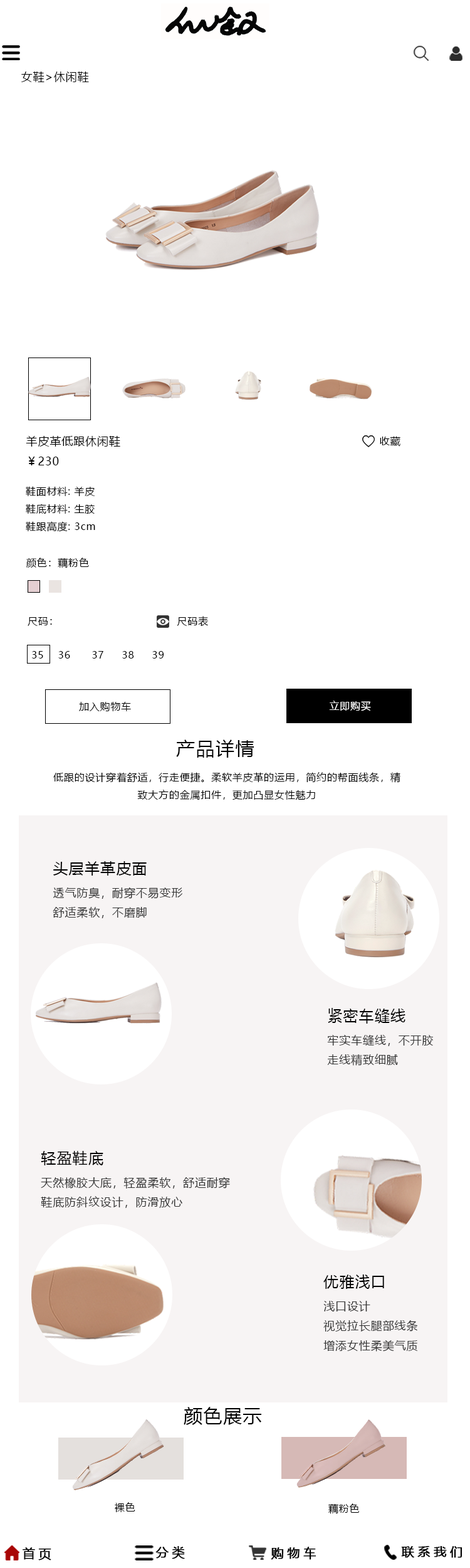
<style>
.page{position:relative;width:470px;height:1568px;background:#ffffff}
.page>*{position:absolute;margin:0}
.t1{font:11.3px "MicrosoftYaHei";letter-spacing:0.05em;color:#000000}
.t2{font:10px "MicrosoftYaHei";letter-spacing:0.05em;color:#000000}
.t3{font:10px "MicrosoftYaHei";letter-spacing:0.05em;color:#ffffff}
.t4{font:18.8px "MicrosoftYaHei";letter-spacing:0.05em;color:#000000}
.t5{font:11.3px "MicrosoftYaHei";letter-spacing:0.05em;color:#333333}
.t6{font:15.1px "MicrosoftYaHei";letter-spacing:0.05em;color:#000000}
.t7{font:12.5px "MicrosoftYaHei";letter-spacing:0.26em;color:#000000;font-weight:bold}
</style>
<div class="page">
<p class="t1" style="left:21px;top:72px;width:68px;height:10px">女鞋&gt;休闲鞋</p>
<p class="t1" style="left:26px;top:436px;width:94px;height:29px">羊皮革低跟休闲鞋<br>￥230</p>
<p class="t2" style="left:380px;top:436px;width:21px;height:11px">收藏</p>
<p class="t2" style="left:26px;top:486px;width:69px;height:46px">鞋面材料: 羊皮<br>鞋底材料: 生胶<br>鞋跟高度: 3cm</p>
<p class="t2" style="left:26px;top:558px;width:63px;height:10px">颜色：藕粉色</p>
<p class="t2" style="left:28px;top:617px;width:24px;height:9px">尺码：</p>
<p class="t2" style="left:177px;top:616px;width:31px;height:11px">尺码表</p>
<p class="t2" style="left:32px;top:651px;width:132px;height:8px">35    36      37     38     39</p>
<p class="t2" style="left:79px;top:702px;width:52px;height:9px">加入购物车</p>
<p class="t3" style="left:329px;top:701px;width:42px;height:10px">立即购买</p>
<p class="t4" style="left:176px;top:739px;width:79px;height:19px">产品详情</p>
<p class="t2" style="left:53px;top:772px;width:348px;height:28px;text-align:center">低跟的设计穿着舒适，行走便捷。柔软羊皮革的运用，简约的帮面线条，精致大方的金属扣件，更加凸显女性魅力</p>
<p class="t5" style="left:53px;top:861px;width:130px;height:57px"><span class="t6">头层羊革皮面<br></span>透气防臭，耐穿不易变形<br>舒适柔软，不磨脚</p>
<p class="t5" style="left:327px;top:1008px;width:106px;height:58px"><span class="t6">紧密车缝线<br></span>牢实车缝线，不开胶<br>走线精致细腻</p>
<p class="t5" style="left:41px;top:1151px;width:189px;height:57px"><span class="t6">轻盈鞋底<br></span>天然橡胶大底，轻盈柔软，舒适耐穿<br>鞋底防斜纹设计，防滑放心</p>
<p class="t5" style="left:324px;top:1274px;width:94px;height:78px"><span class="t6">优雅浅口<br></span>浅口设计<br>视觉拉长腿部线条<br>增添女性柔美气质</p>
<p class="t4" style="left:184px;top:1407px;width:78px;height:18px">颜色展示</p>
<p class="t2" style="left:115px;top:1502px;width:20px;height:10px">裸色</p>
<p class="t2" style="left:329px;top:1503px;width:31px;height:11px">藕粉色</p>
<p class="t7" style="left:23px;top:1547px;width:28px;height:13px">首页</p>
<p class="t7" style="left:156px;top:1546px;width:29px;height:13px">分类</p>
<p class="t7" style="left:271px;top:1547px;width:46px;height:13px">购物车</p>
<p class="t7" style="left:401px;top:1546px;width:62px;height:12px">联系我们</p>
</div>
